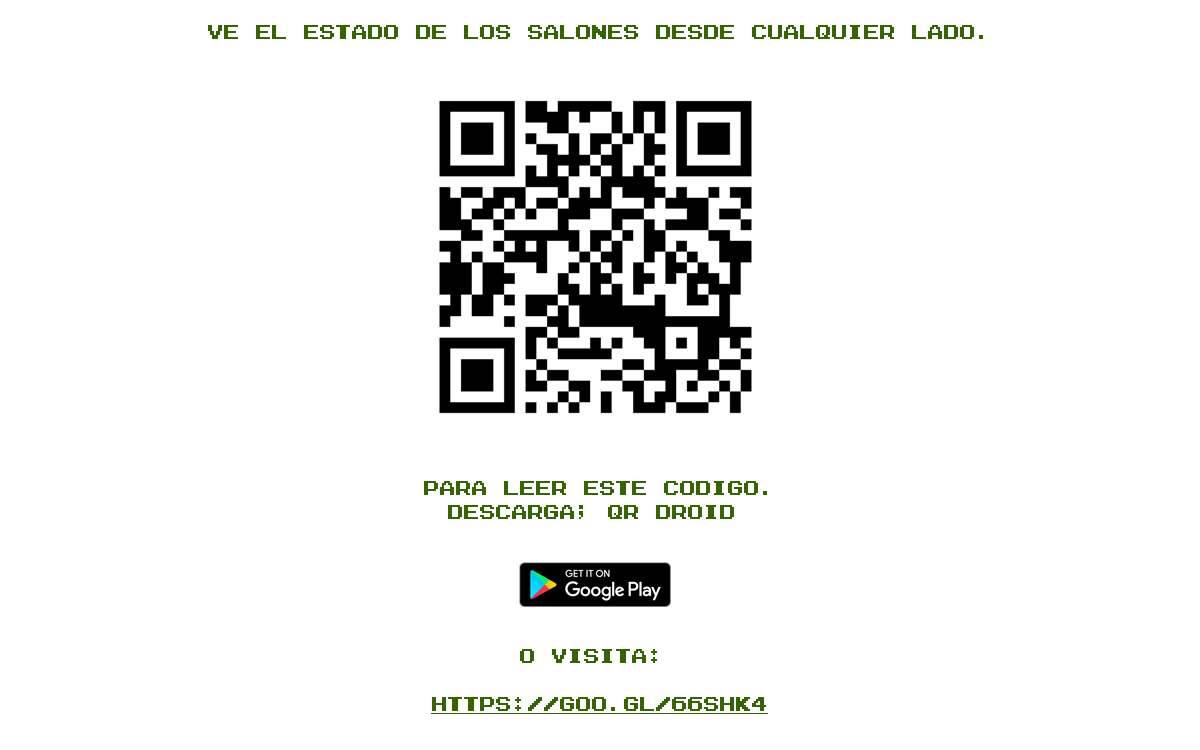
<style>
.page{position:relative;width:1200px;height:750px;background:#ffffff}
.page>*{position:absolute;margin:0}
.t1{font:20px "Zig";color:#336600}
.t2{font:20px "Zig";color:#336600;text-decoration:underline}
</style>
<div class="page">
<p class="t1" style="left:208px;top:25px;width:775px;height:689px;text-align:center">ve el estado de los salones desde cualquier lado.<br><br><br><br><br><br><br><br><br><br><br><br><br><br><br><br><br><br><br>para leer este codigo.<br>descarga; Qr droid <br><br><br><br><br> <br>o visita: <br><br><span class="t2">https://goo.gl/66shk4</span></p>
</div>
